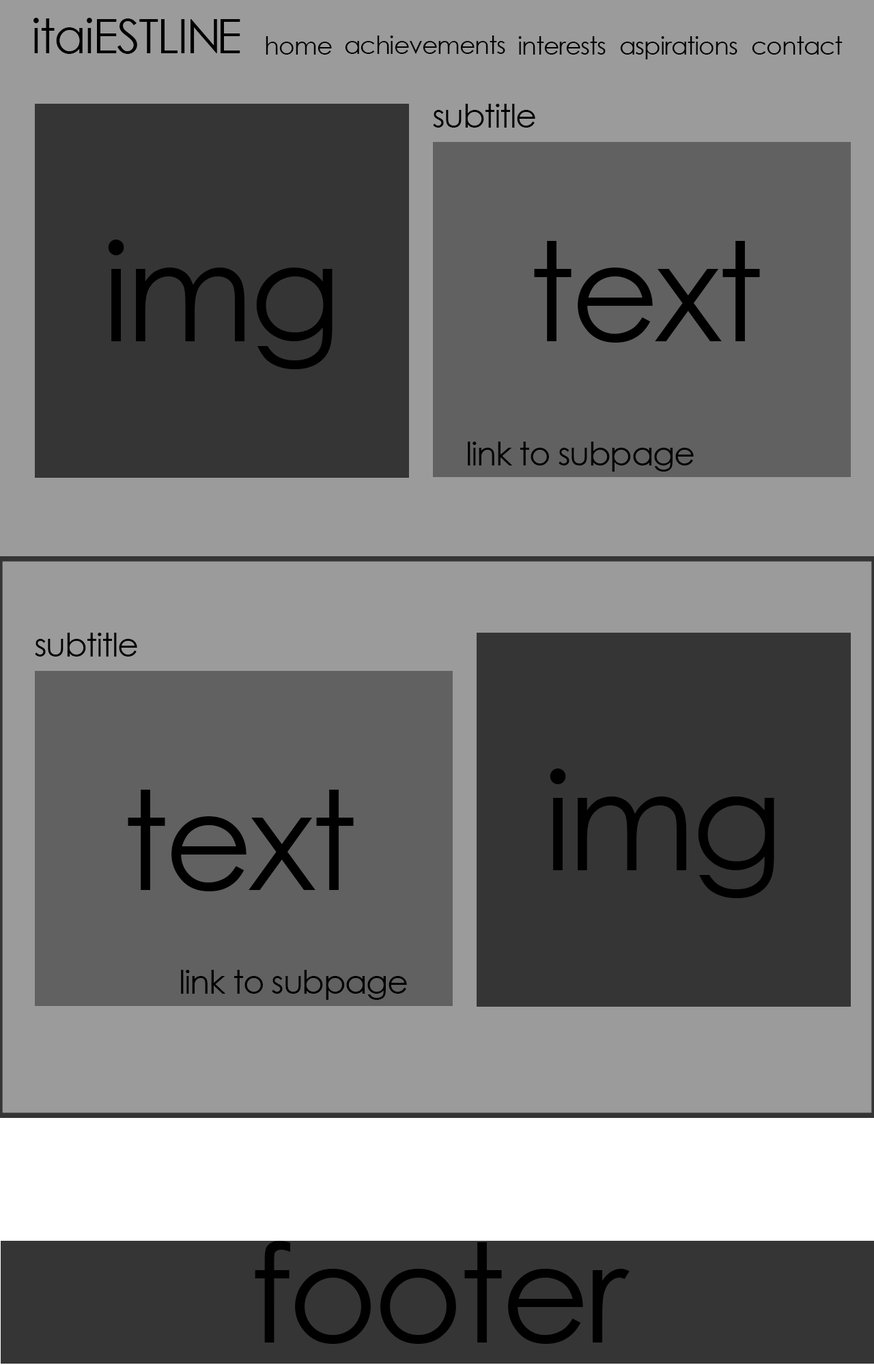
<style>
.page{position:relative;width:874px;height:1365px;background:#9b9b9b}
.page>*{position:absolute;margin:0}
.t1{font:47.1px "CenturyGothic";letter-spacing:-0.03em;color:#000000}
.t2{font:24.6px "CenturyGothic";letter-spacing:-0.03em;color:#000000}
.t3{font:32.8px "CenturyGothic";letter-spacing:-0.03em;color:#000000}
.t4{font:136.5px "CenturyGothic";letter-spacing:-0.03em;color:#000000}
</style>
<div class="page">
<p class="t1" style="left:33px;top:18px;width:207px;height:36px">itaiESTLINE</p>
<p class="t2" style="left:265px;top:36px;width:67px;height:19px">home</p>
<p class="t2" style="left:345px;top:35px;width:160px;height:19px">achievements</p>
<p class="t2" style="left:518px;top:36px;width:87px;height:19px">interests</p>
<p class="t2" style="left:620px;top:36px;width:117px;height:23px">aspirations</p>
<p class="t2" style="left:751px;top:36px;width:91px;height:19px">contact</p>
<p class="t3" style="left:433px;top:104px;width:102px;height:24px">subtitle</p>
<p class="t4" style="left:108px;top:240px;width:224px;height:129px">img</p>
<p class="t4" style="left:534px;top:241px;width:226px;height:102px">text</p>
<p class="t3" style="left:468px;top:442px;width:225px;height:30px">link to subpage</p>
<p class="t3" style="left:35px;top:633px;width:102px;height:24px">subtitle</p>
<p class="t4" style="left:549px;top:768px;width:225px;height:130px">img</p>
<p class="t4" style="left:128px;top:790px;width:226px;height:101px">text</p>
<p class="t3" style="left:181px;top:970px;width:226px;height:30px">link to subpage</p>
<p class="t4" style="left:255px;top:1241px;width:374px;height:103px">footer</p>
</div>
